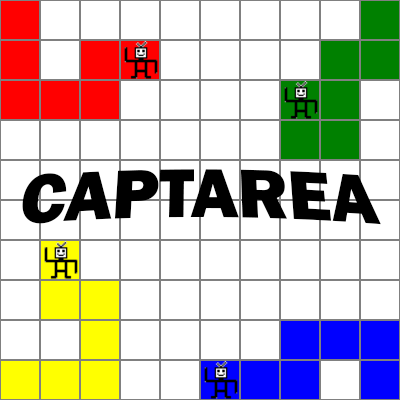
<style>
.page{position:relative;width:400px;height:400px;background:#ffffff}
.page>*{position:absolute;margin:0}
.t1{font:72px "FranklinGothic-Heavy";color:#000000}
</style>
<div class="page">
<p class="t1" style="left:22px;top:169px;width:359px;height:56px">CAPTAREA</p>
</div>
